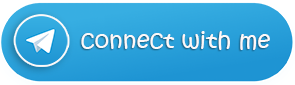
<style>
.page{position:relative;width:295px;height:85px}
.page>*{position:absolute;margin:0}
.t1{font:23.3px "KristenITC-Regular";color:#fcf9f9}
</style>
<div class="page">
<p class="t1" style="left:81px;top:31px;width:189px;height:19px">connect with me</p>
</div>
